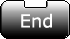
<style>
.page{position:relative;width:70px;height:39px}
.page>*{position:absolute;margin:0}
.t1{font:18px "Verdana";color:#ffffff}
</style>
<div class="page">
<p class="t1" style="left:21px;top:13px;width:31px;height:15px">End</p>
</div>
